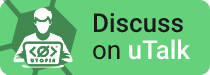
<style>
.page{position:relative;width:210px;height:75px;background:#65d17b}
.page>*{position:absolute;margin:0}
.t1{font:26px "Roboto-Medium";color:#1b1b1b}
.t2{font:26px "Roboto-Regular";color:#1b1b1b}
.t3{font:26px "Roboto-Medium";color:#ffffff}
</style>
<div class="page">
<p class="t1" style="left:93px;top:13px;width:98px;height:47px">Discuss<br><span class="t2">on </span><span class="t3">uTalk</span></p>
</div>
